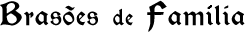
<style>
.page{position:relative;width:247px;height:32px;background:#ffffff}
.page>*{position:absolute;margin:0}
.t1{font:24px "Kelmscott-Regular";letter-spacing:0.05em;color:#000000}
.t2{font:30px "Kelmscott-Regular";letter-spacing:0.05em;color:#000000}
.t3{font:20px "Kelmscott-Regular";letter-spacing:0.05em;color:#000000}
.t4{font:20px "PerryGothic";letter-spacing:-0.025em;color:#000000}
</style>
<div class="page">
<p class="t1" style="left:0px;top:0px;width:245px;height:32px"><span class="t2">B</span>rasoes <span class="t3">de </span><span class="t2">F</span>amilia</p>
<p class="t4" style="left:65px;top:5px;width:10px;height:6px;rotate:12deg">~</p>
</div>
